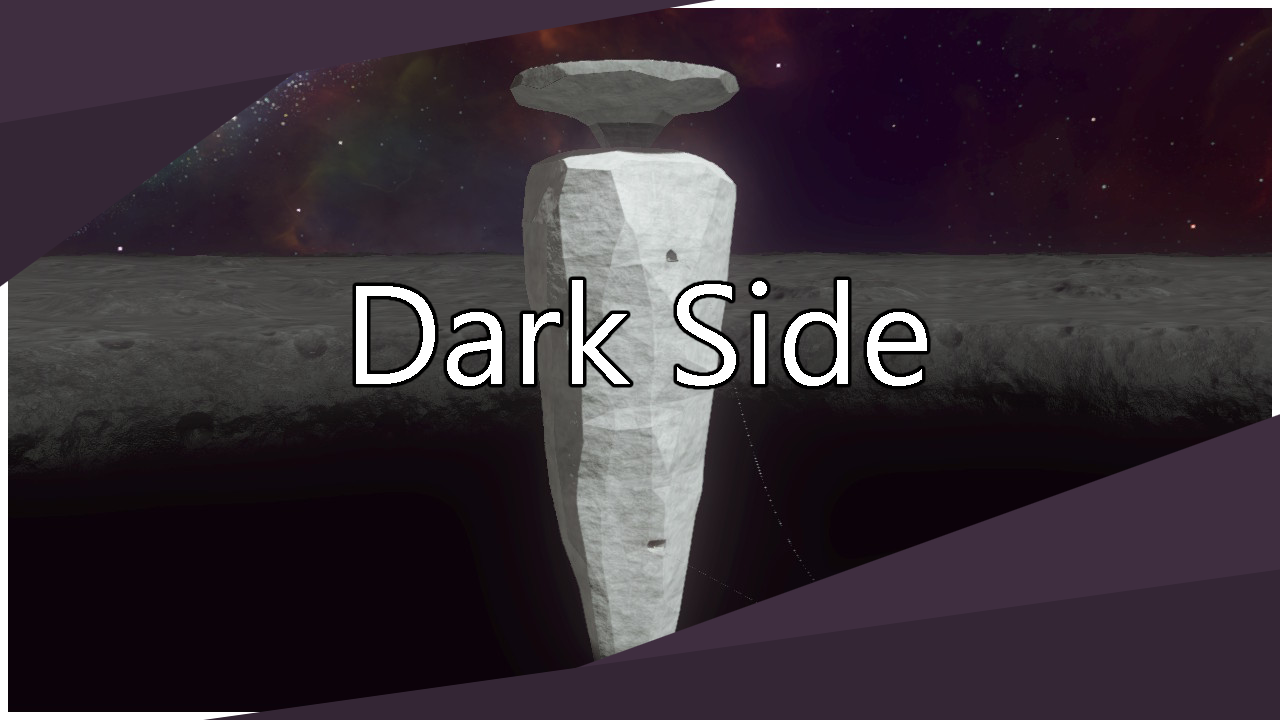
<style>
.page{position:relative;width:1280px;height:720px}
.page>*{position:absolute;margin:0}
.t1{font:140px "SegoeUI";color:#ffffff}
</style>
<div class="page">
<p class="t1" style="left:356px;top:280px;width:571px;height:106px">Dark Side</p>
</div>
